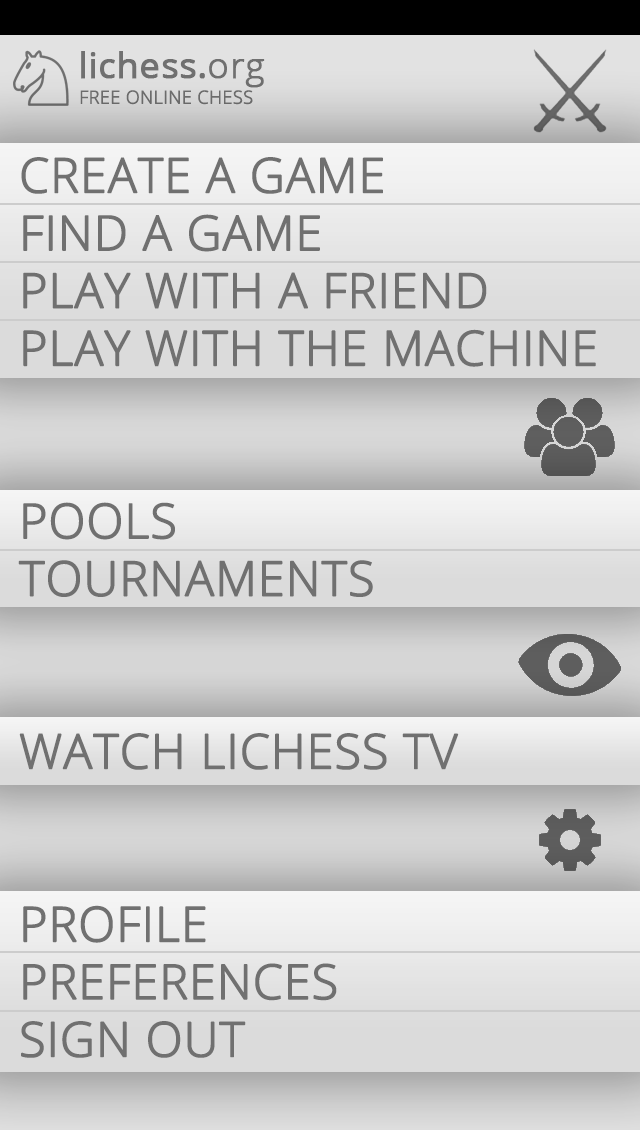
<style>
.page{position:relative;width:640px;height:1130px}
.page>*{position:absolute;margin:0}
.t1{font:36px "OpenSans";color:#707070;font-weight:bold}
.t2{font:36px "OpenSans-Light";color:#707070;font-weight:bold}
.t3{font:18px "OpenSans-Light";color:#707070;font-weight:bold}
.t4{font:48px "OpenSans-Light";color:#707070;font-weight:bold}
</style>
<div class="page">
<p class="t1" style="left:81px;top:51px;width:184px;height:37px">lichess.<span class="t2">org</span></p>
<p class="t3" style="left:80px;top:90px;width:173px;height:15px">FREE ONLINE CHESS</p>
<p class="t4" style="left:18px;top:157px;width:578px;height:901px">CREATE A GAME<br>FIND A GAME<br>PLAY WITH A FRIEND<br>PLAY WITH THE MACHINE<br><br><br>POOLS<br>TOURNAMENTS<br><br><br>WATCH LICHESS TV<br><br><br>PROFILE<br>PREFERENCES<br>SIGN OUT</p>
</div>
